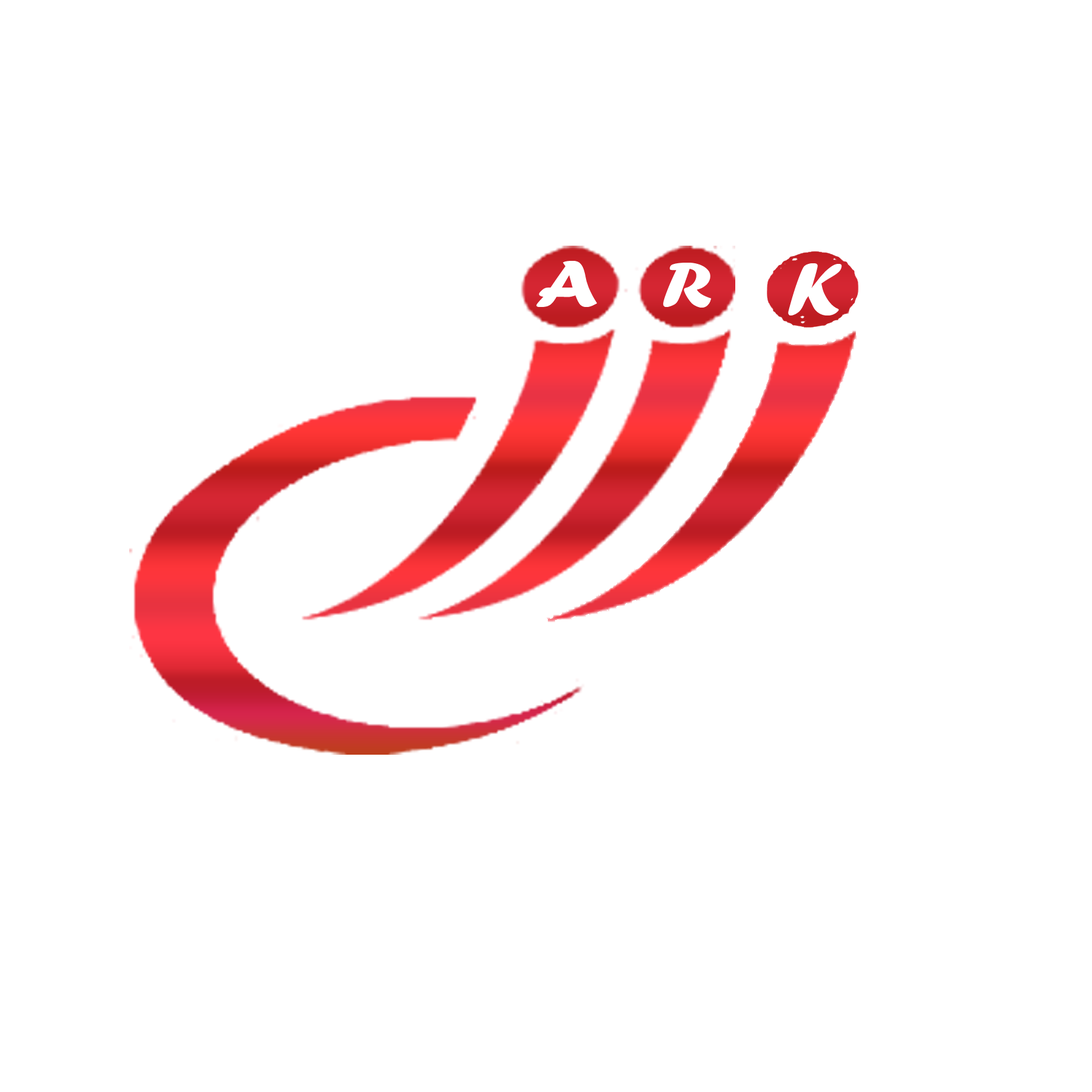
<style>
.page{position:relative;width:1092px;height:1092px;background:#ffffff}
.page>*{position:absolute;margin:0}
.t1{font:68.5px "ForteMT";color:#ffffff;scale:1.24 1}
.t2{font:68.1px "ForteMT";color:#ffffff;scale:1.2 1}
.t3{font:76.8px "ForteMT";color:#ffffff;scale:1.06 1}
</style>
<div class="page">
<p class="t1" style="left:536px;top:261px;width:61px;height:46px">A</p>
<p class="t2" style="left:663px;top:263px;width:49px;height:45px">R</p>
<p class="t3" style="left:788px;top:263px;width:54px;height:52px">K</p>
</div>
